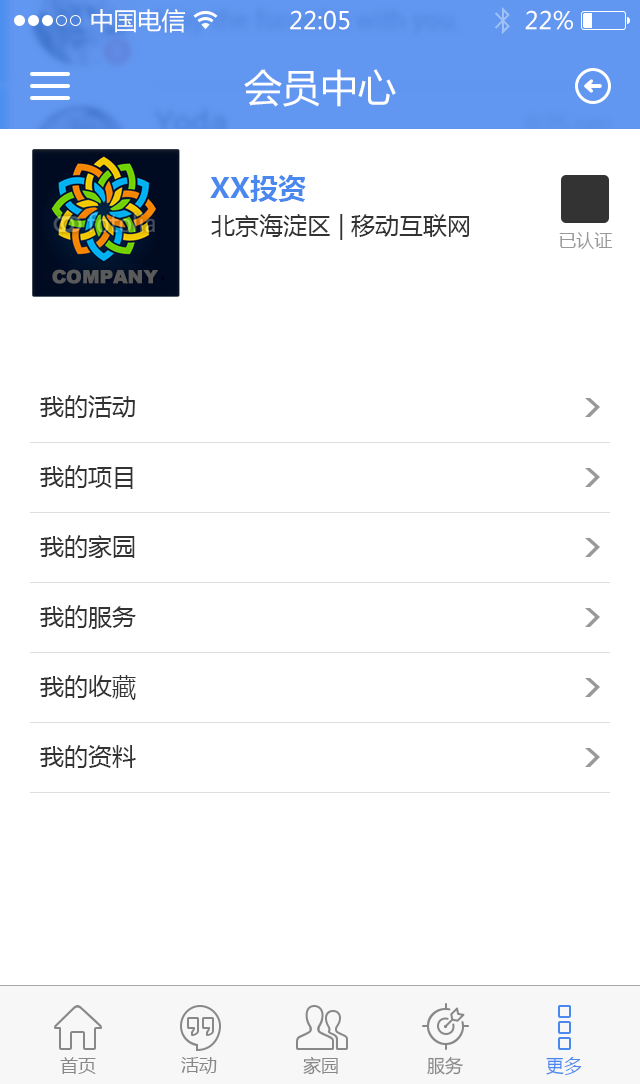
<style>
.page{position:relative;width:640px;height:1084px;background:#ffffff}
.page>*{position:absolute;margin:0}
.t1{font:24px "MicrosoftYaHei";color:#ffffff}
.t2{font:38px "MicrosoftYaHei";color:#ffffff}
.t3{font:28px "MicrosoftYaHei-Bold";color:#4a87ee}
.t4{font:24px "MicrosoftYaHei";color:#333333}
.t5{font:18px "MicrosoftYaHei";color:#999999}
.t6{font:18px "MicrosoftYaHei";color:#888888}
.t7{font:18px "MicrosoftYaHei";color:#4a87ee}
</style>
<div class="page">
<p class="t1" style="left:91px;top:9px;width:94px;height:24px">中国电信</p>
<p class="t1" style="left:290px;top:10px;width:60px;height:20px">22:05</p>
<p class="t1" style="left:525px;top:10px;width:48px;height:20px">22%</p>
<p class="t2" style="left:244px;top:69px;width:152px;height:38px">会员中心</p>
<p class="t3" style="left:210px;top:175px;width:96px;height:27px">XX投资</p>
<p class="t4" style="left:211px;top:214px;width:258px;height:26px">北京海淀区 | 移动互联网</p>
<p class="t5" style="left:559px;top:232px;width:54px;height:17px">已认证</p>
<p class="t4" style="left:40px;top:395px;width:95px;height:23px">我的活动</p>
<p class="t4" style="left:40px;top:465px;width:93px;height:24px">我的项目</p>
<p class="t4" style="left:40px;top:535px;width:95px;height:23px">我的家园</p>
<p class="t4" style="left:40px;top:605px;width:96px;height:24px">我的服务</p>
<p class="t4" style="left:40px;top:675px;width:96px;height:25px">我的收藏</p>
<p class="t4" style="left:40px;top:745px;width:96px;height:23px">我的资料</p>
<p class="t6" style="left:60px;top:1057px;width:36px;height:17px">首页</p>
<p class="t6" style="left:181px;top:1057px;width:36px;height:17px">活动</p>
<p class="t6" style="left:303px;top:1056px;width:35px;height:19px">家园</p>
<p class="t6" style="left:427px;top:1056px;width:36px;height:19px">服务</p>
<p class="t7" style="left:546px;top:1057px;width:35px;height:18px">更多</p>
</div>
